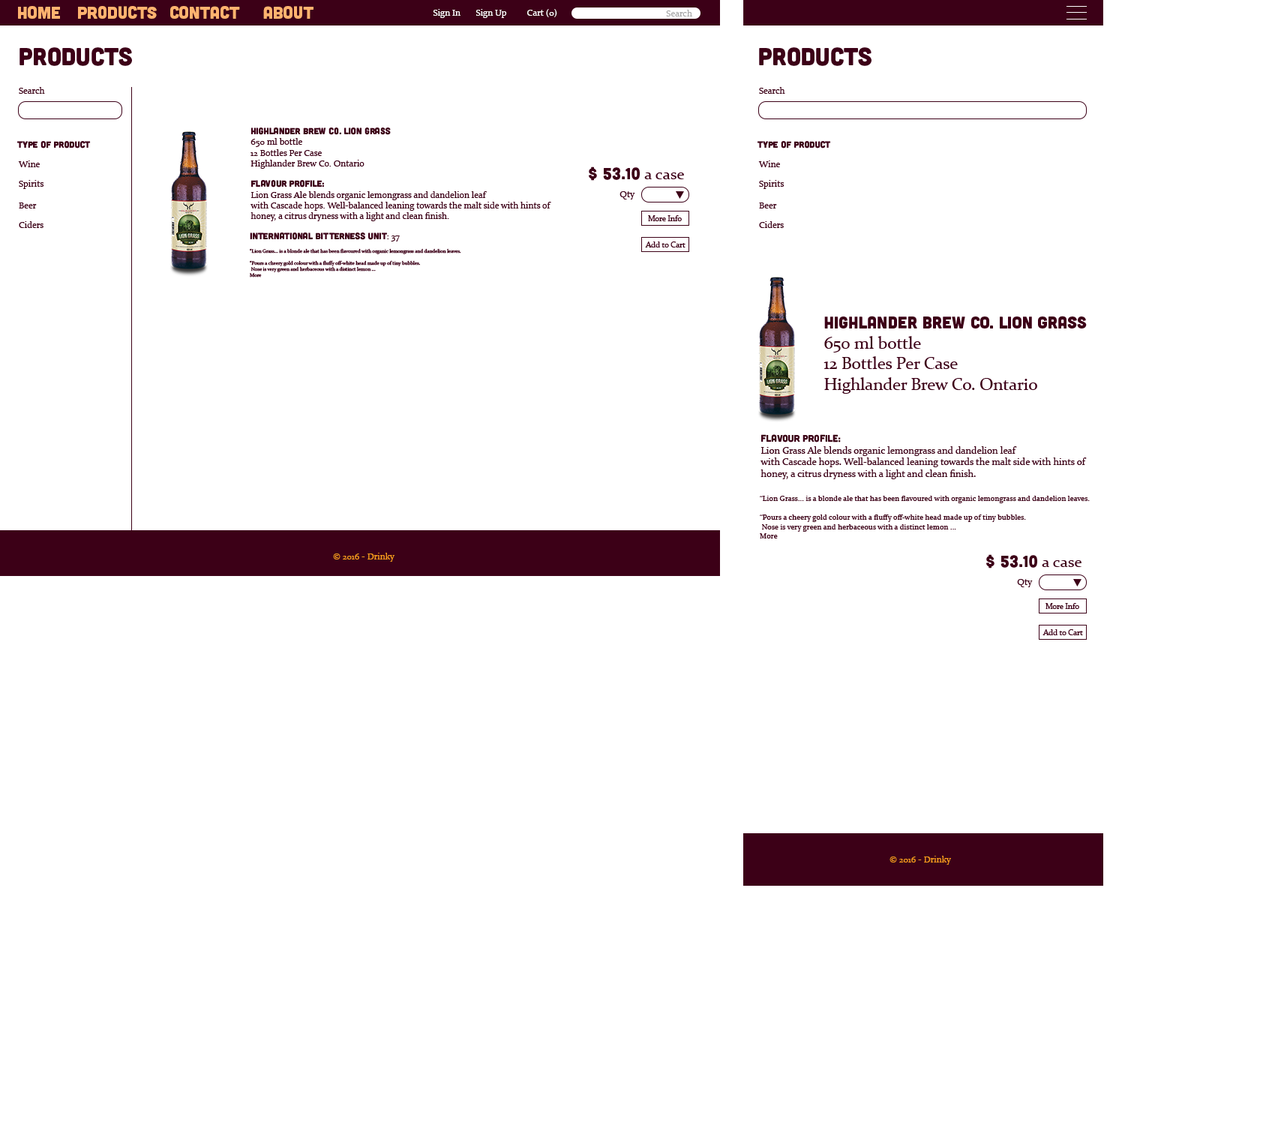
<style>
.page{position:relative;width:1272px;height:1125px;background:#ffffff}
.page>*{position:absolute;margin:0}
.t1{font:17.2px "Cubano-Regular";color:#ffb36f}
.t2{font:9px "Constantia";color:#ffffff}
.t3{font:9px "Constantia";color:#a8a8a8}
.t4{font:24.7px "Cubano-Regular";color:#3c0017}
.t5{font:9px "Constantia";color:#3c0017}
.t6{font:9px "Cubano-Regular";color:#3c0017}
.t7{font:16px "Cubano-Regular";color:#3c0017}
.t8{font:16px "Constantia";color:#3c0017}
.t9{font:7.9px "Constantia";color:#3c0017}
.t10{font:5px "Constantia";color:#3c0017}
.t11{font:16.9px "Constantia";color:#3c0017}
.t12{font:16.9px "Cubano-Regular";color:#3c0017}
.t13{font:9.8px "Constantia";color:#3c0017}
.t14{font:9.8px "Cubano-Regular";color:#3c0017}
.t15{font:7.8px "Constantia";color:#3c0017}
.t16{font:9px "Constantia";color:#f89b1c}
</style>
<div class="page">
<p class="t1" style="left:18px;top:6px;width:42px;height:13px">Home</p>
<p class="t1" style="left:78px;top:6px;width:79px;height:13px">Products</p>
<p class="t1" style="left:170px;top:6px;width:70px;height:13px">Contact</p>
<p class="t1" style="left:263px;top:6px;width:51px;height:13px">About</p>
<p class="t2" style="left:433px;top:9px;width:27px;height:9px">Sign In</p>
<p class="t2" style="left:476px;top:9px;width:31px;height:9px">Sign Up</p>
<p class="t2" style="left:527px;top:9px;width:30px;height:8px">Cart (0)</p>
<p class="t3" style="left:666px;top:10px;width:26px;height:6px">Search</p>
<p class="t4" style="left:20px;top:47px;width:112px;height:19px">Products</p>
<p class="t4" style="left:759px;top:47px;width:113px;height:19px">Products</p>
<p class="t5" style="left:19px;top:87px;width:26px;height:7px">Search</p>
<p class="t5" style="left:759px;top:87px;width:26px;height:7px">Search</p>
<p class="t5" style="left:250px;top:128px;width:141px;height:41px"><span class="t6">Highlander Brew Co. Lion Grass<br></span>650 ml bottle<br>12 Bottles Per Case<br>Highlander Brew Co. Ontario</p>
<p class="t6" style="left:17px;top:141px;width:74px;height:7px">Type of PRoduct</p>
<p class="t6" style="left:758px;top:141px;width:73px;height:7px">Type of PRoduct</p>
<p class="t5" style="left:18px;top:160px;width:22px;height:7px">Wine</p>
<p class="t5" style="left:758px;top:160px;width:22px;height:7px">Wine</p>
<p class="t7" style="left:589px;top:166px;width:95px;height:15px">$ 53.10<span class="t8"> a case</span></p>
<p class="t5" style="left:19px;top:180px;width:25px;height:9px">Spirits</p>
<p class="t5" style="left:250px;top:180px;width:301px;height:41px"><span class="t6">Flavour Profile:</span><br>Lion Grass Ale blends organic lemongrass and dandelion leaf<br>with Cascade hops. Well-balanced leaning towards the malt side with hints of<br>honey, a citrus dryness with a light and clean finish.</p>
<p class="t5" style="left:759px;top:180px;width:25px;height:9px">Spirits</p>
<p class="t5" style="left:620px;top:191px;width:15px;height:9px">Qty</p>
<p class="t5" style="left:19px;top:202px;width:18px;height:6px">Beer</p>
<p class="t5" style="left:759px;top:202px;width:18px;height:6px">Beer</p>
<p class="t5" style="left:19px;top:221px;width:25px;height:7px">Ciders</p>
<p class="t9" style="left:648px;top:215px;width:34px;height:6px">More Info</p>
<p class="t5" style="left:759px;top:221px;width:25px;height:7px">Ciders</p>
<p class="t6" style="left:250px;top:232px;width:150px;height:10px">International Bitterness Unit<span class="t5">: 37</span></p>
<p class="t9" style="left:645px;top:242px;width:41px;height:6px">Add to Cart</p>
<p class="t10" style="left:250px;top:248px;width:211px;height:30px">“Lion Grass... is a blonde ale that has been flavoured with organic lemongrass and dandelion leaves.<br><br>“Pours a cheery gold colour with a fluffy off-white head made up of tiny bubbles.<br> Nose is very green and herbaceous with a distinct lemon ... <br>More</p>
<p class="t11" style="left:824px;top:316px;width:263px;height:78px"><span class="t12">Highlander Brew Co. Lion Grass<br></span>650 ml bottle<br>12 Bottles Per Case<br>Highlander Brew Co. Ontario</p>
<p class="t13" style="left:760px;top:434px;width:327px;height:45px"><span class="t14">Flavour Profile:</span><br>Lion Grass Ale blends organic lemongrass and dandelion leaf<br>with Cascade hops. Well-balanced leaning towards the malt side with hints of<br>honey, a citrus dryness with a light and clean finish.</p>
<p class="t15" style="left:760px;top:496px;width:330px;height:42px">“Lion Grass... is a blonde ale that has been flavoured with organic lemongrass and dandelion leaves.<br><br>“Pours a cheery gold colour with a fluffy off-white head made up of tiny bubbles.<br> Nose is very green and herbaceous with a distinct lemon ... <br>More</p>
<p class="t16" style="left:333px;top:553px;width:61px;height:9px">© 2016 - Drinky</p>
<p class="t7" style="left:986px;top:554px;width:96px;height:14px">$ 53.10<span class="t8"> a case</span></p>
<p class="t5" style="left:1017px;top:579px;width:16px;height:8px">Qty</p>
<p class="t9" style="left:1046px;top:603px;width:33px;height:6px">More Info</p>
<p class="t9" style="left:1042px;top:629px;width:41px;height:6px">Add to Cart</p>
<p class="t16" style="left:890px;top:856px;width:61px;height:9px">© 2016 - Drinky</p>
</div>
